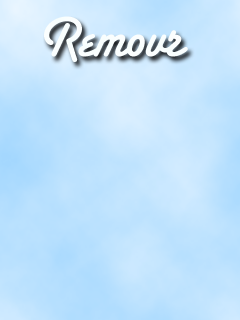
<style>
.page{position:relative;width:240px;height:320px}
.page>*{position:absolute;margin:0}
.t1{font:60px "SantaFeLetPlain";color:#fefefe}
</style>
<div class="page">
<p class="t1" style="left:44px;top:16px;width:144px;height:46px">Removr</p>
</div>
